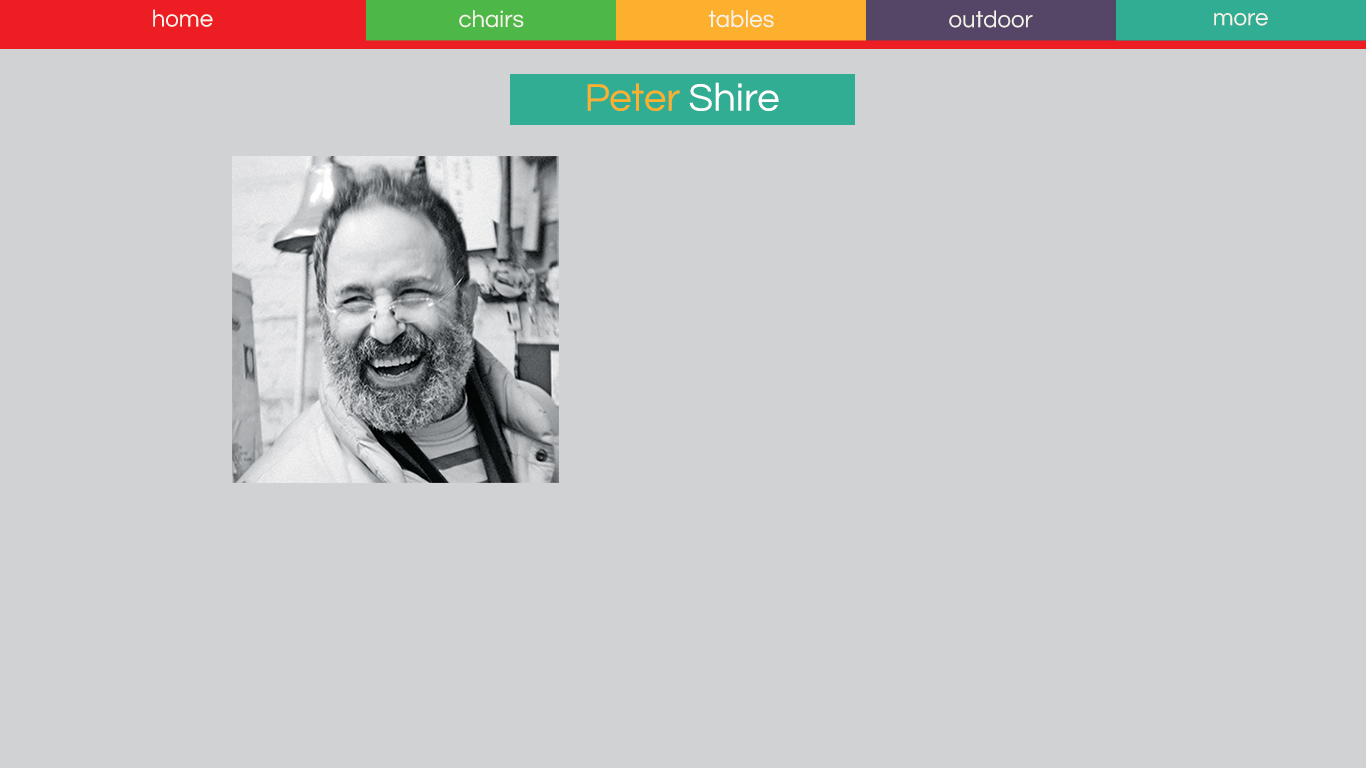
<style>
.page{position:relative;width:1366px;height:768px;background:#d1d2d4}
.page>*{position:absolute;margin:0}
.t1{font:24px "Questrial-Regular";color:#f4f2e9}
.t2{font:40px "Questrial-Regular";color:#fcb02e}
.t3{font:40px "Questrial-Regular";color:#ffffff}
</style>
<div class="page">
<p class="t1" style="left:153px;top:9px;width:60px;height:18px">home</p>
<p class="t1" style="left:459px;top:10px;width:65px;height:18px">chairs</p>
<p class="t1" style="left:708px;top:10px;width:66px;height:18px">tables</p>
<p class="t1" style="left:949px;top:10px;width:84px;height:18px">outdoor</p>
<p class="t1" style="left:1214px;top:13px;width:54px;height:13px">more</p>
<p class="t2" style="left:587px;top:82px;width:192px;height:29px">Peter <span class="t3">Shire</span></p>
</div>
